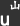
<style>
.page{position:relative;width:20px;height:26px;background:#333333}
.page>*{position:absolute;margin:0}
.t1{font:12px "DFKaiShu-SB-Estd-BF";color:#ffffff;font-weight:bold}
.t2{font:18px "ArialMT";color:#ffffff;font-weight:bold}
</style>
<div class="page">
<p class="t1" style="left:10px;top:0px;width:10px;height:10px">山</p>
<p class="t2" style="left:0px;top:15px;width:9px;height:11px">u</p>
</div>
